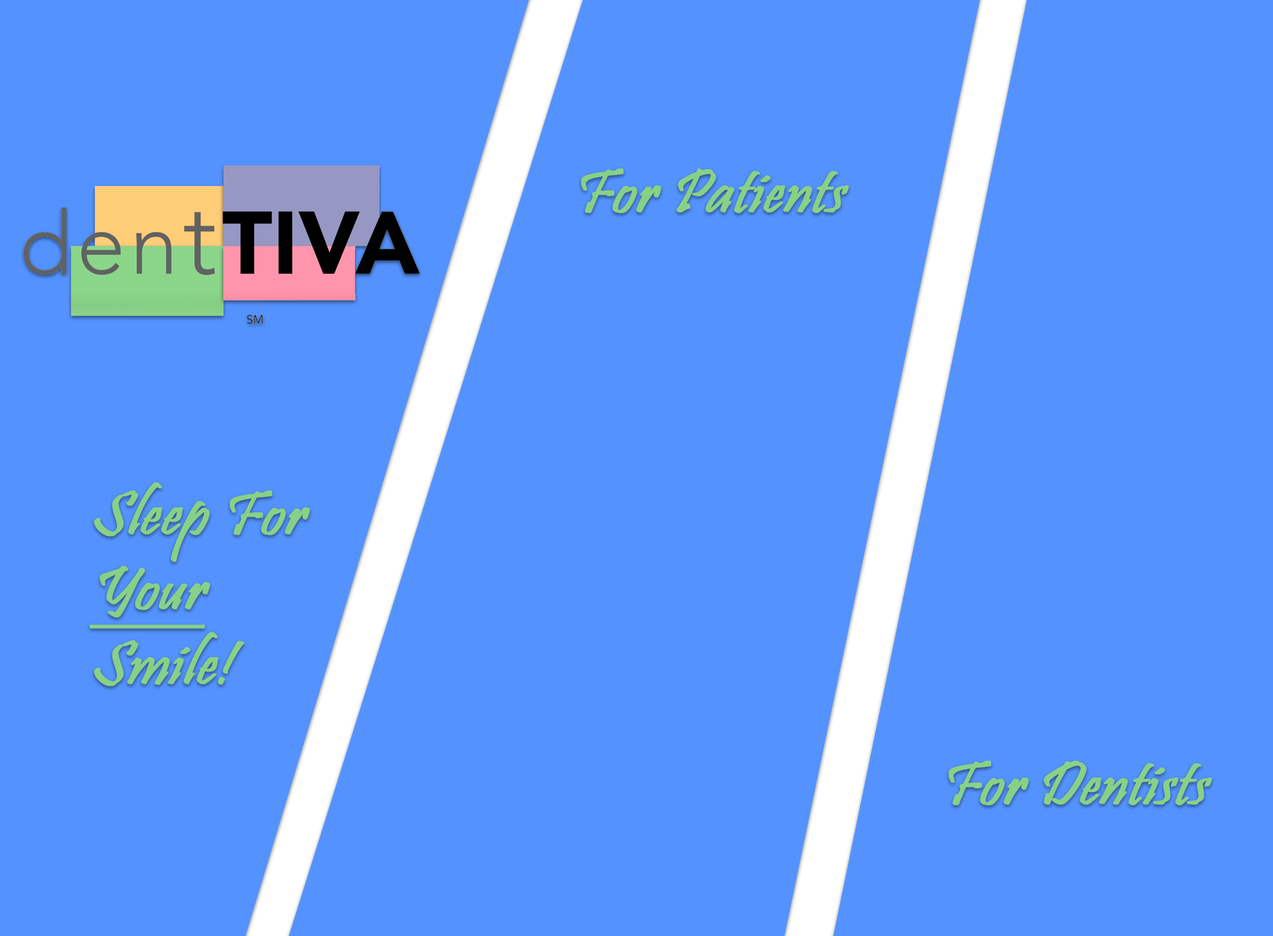
<style>
.page{position:relative;width:1273px;height:936px;background:#5493ff}
.page>*{position:absolute;margin:0}
.t1{font:62.4px "Pristina-Regular";color:#87d187;font-weight:bold;font-style:italic}
.t2{font:62.4px "Pristina-Regular";color:#87d187;font-weight:bold;font-style:italic;text-decoration:underline}
</style>
<div class="page">
<p class="t1" style="left:581px;top:169px;width:268px;height:44px">For Patients</p>
<p class="t1" style="left:90px;top:483px;width:220px;height:204px">Sleep For <br><span class="t2">Your</span> <br>Smile!</p>
<p class="t1" style="left:949px;top:761px;width:263px;height:45px">For Dentists</p>
</div>
